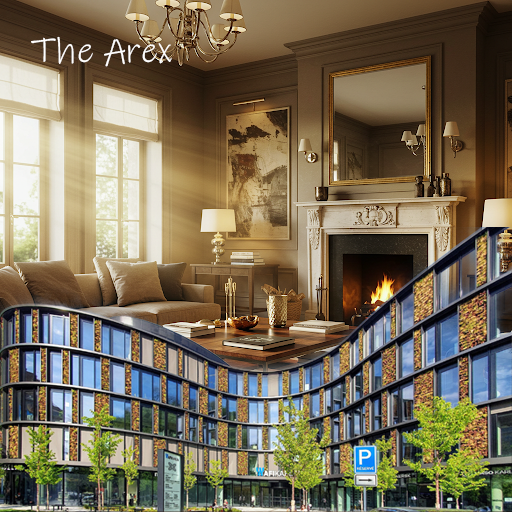
<style>
.page{position:relative;width:512px;height:512px}
.page>*{position:absolute;margin:0}
.t1{font:36px "InkFree";color:#fffefe}
</style>
<div class="page">
<p class="t1" style="left:31px;top:36px;width:141px;height:31px">The Arex</p>
</div>
